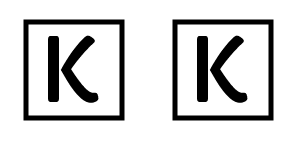
<style>
.page{position:relative;width:300px;height:150px;background:#ffffff}
.page>*{position:absolute;margin:0}
.t1{font:88.3px "Capriola-Regular";color:#000000}
</style>
<div class="page">
<p class="t1" style="left:48px;top:35px;width:51px;height:71px">K</p>
<p class="t1" style="left:197px;top:35px;width:51px;height:71px">K</p>
</div>
